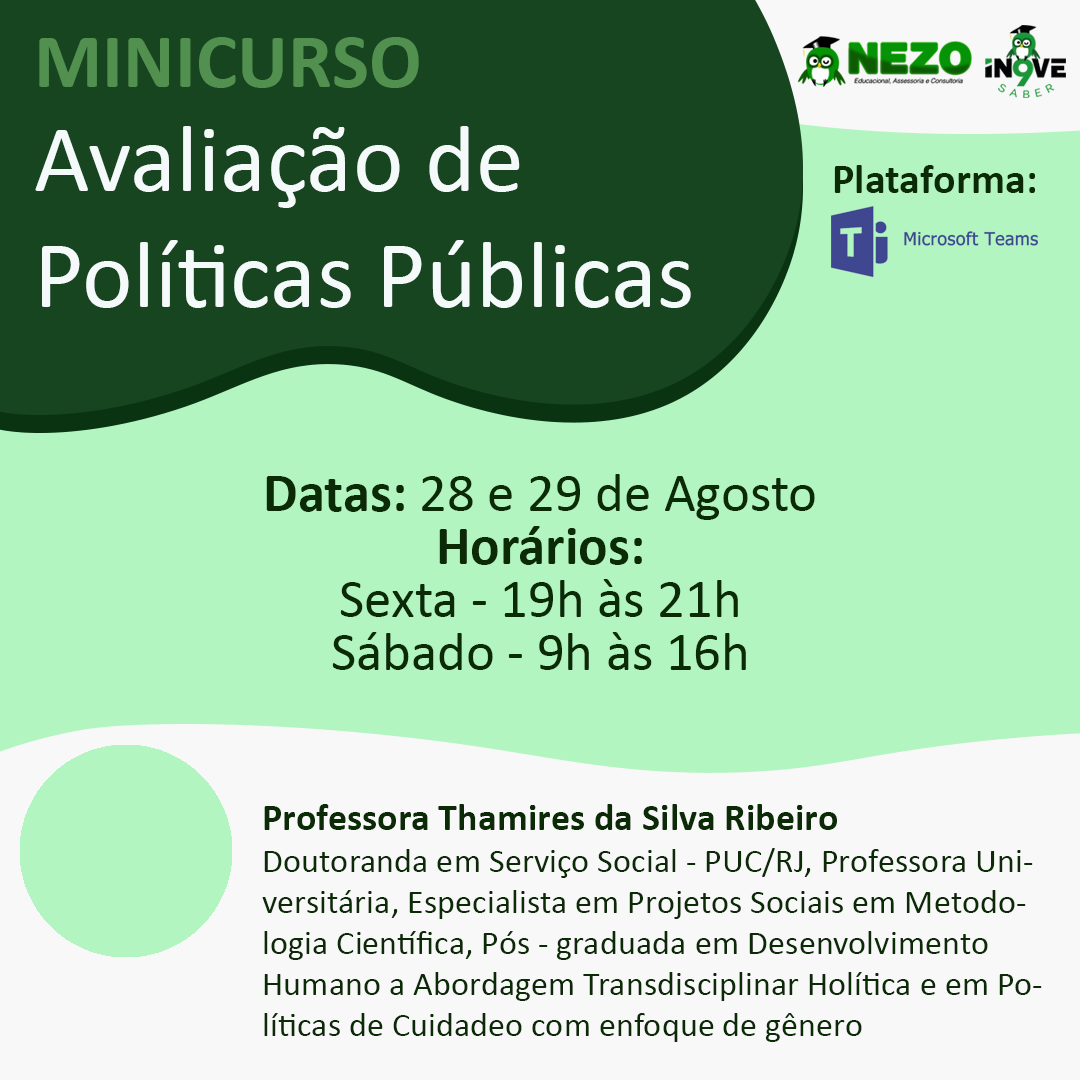
<style>
.page{position:relative;width:1080px;height:1080px;background:#b2f5c0}
.page>*{position:absolute;margin:0}
.t1{font:96.3px "Calibri";color:#f4faf9}
.t2{font:78.3px "Calibri-Bold";color:#529050}
.t3{font:96.3px/104px "Calibri";color:#f4faf9}
.t4{font:42.3px "Calibri-Bold";color:#0a2b05}
.t5{font:54.8px/53px "Calibri";color:#0a2b05}
.t6{font:54.8px/61.5px "Calibri-Bold";color:#0a2b05}
.t7{font:54.8px/61.5px "Calibri";color:#0a2b05}
.t8{font:54.8px/53px "Calibri-Bold";color:#0a2b05}
.t9{font:34.3px "Calibri";color:#0a2b05}
.t10{font:38.3px/50px "Calibri-Bold";color:#0a2b05}
</style>
<div class="page">
<p class="t1" style="left:35px;top:37px;width:656px;height:271px"><span class="t2">MINICURSO<br></span><span class="t3">Avaliação de <br></span>Políticas Públicas</p>
<p class="t4" style="left:834px;top:165px;width:201px;height:28px">Plataforma:</p>
<p class="t5" style="left:266px;top:474px;width:549px;height:196px;text-align:center"><span class="t6">Datas:</span><span class="t7"> 28 e 29 de Agosto<br></span><span class="t8">Horários:</span> <br>Sexta - 19h às 21h<br>Sábado - 9h às 16h</p>
<p class="t9" style="left:262px;top:804px;width:780px;height:238px"><span class="t10">Professora Thamires da Silva Ribeiro<br></span>Doutoranda em Serviço Social - PUC/RJ, Professora Universitária, Especialista em Projetos Sociais em Metodologia Científica, Pós - graduada em Desenvolvimento Humano a Abordagem Transdisciplinar Holítica e em Políticas de Cuidadeo com enfoque de gênero</p>
</div>
